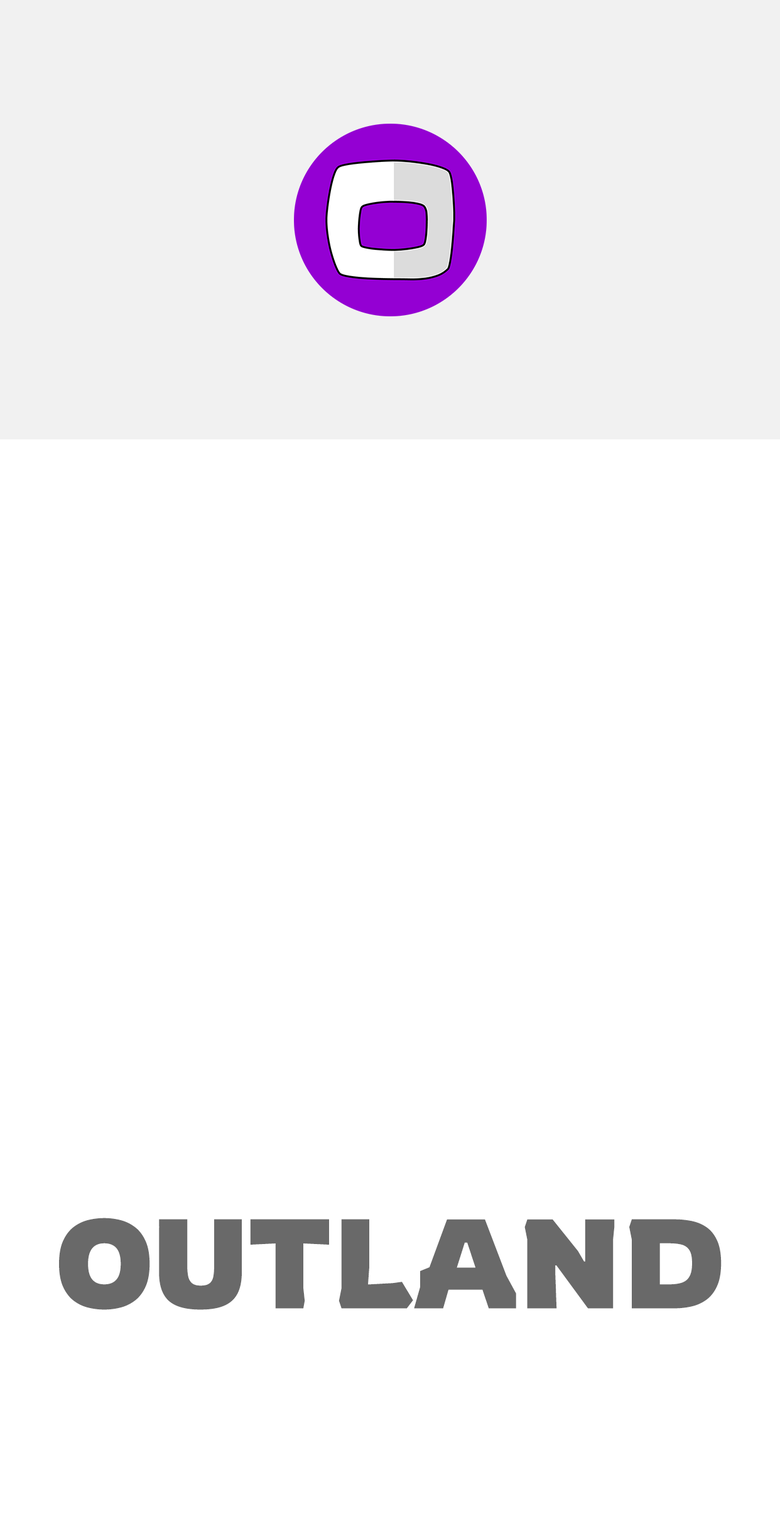
<style>
.page{position:relative;width:780px;height:1529px;background:#ffffff}
.page>*{position:absolute;margin:0}
.t1{font:125.6px "Rowdies-Bold";color:#696969}
</style>
<div class="page">
<p class="t1" style="left:59px;top:1218px;width:662px;height:92px">OUTLAND</p>
</div>
